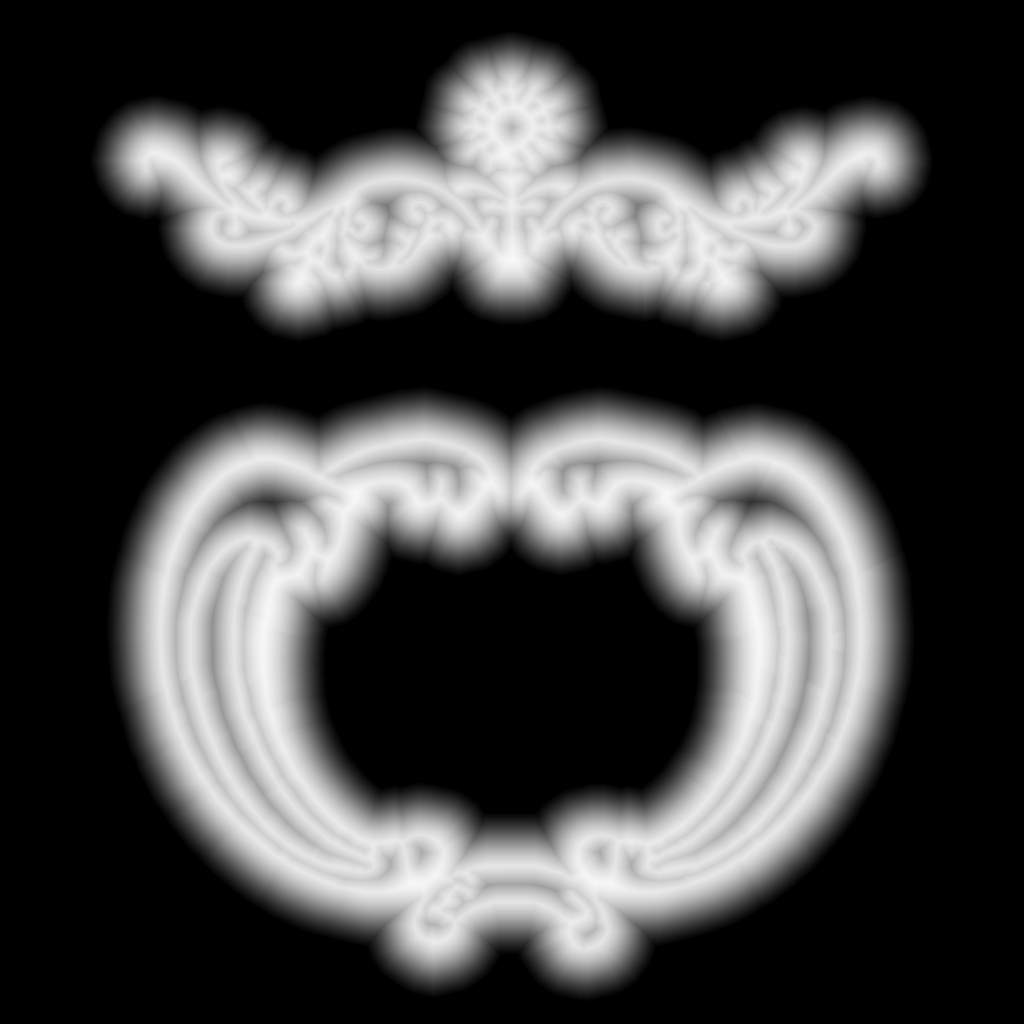
<style>
.page{position:relative;width:1024px;height:1024px;background:#000000}
.page>*{position:absolute;margin:0}
.t1{font:557.2px "VintageDecorativesigns2";color:#e3e3e3}
.t2{font:520.3px "VintageDecorativesigns2";color:#e4e4e4}
</style>
<div class="page">
<p class="t1" style="left:139px;top:79px;width:746px;height:214px">T</p>
<p class="t2" style="left:156px;top:435px;width:710px;height:518px">N</p>
</div>
